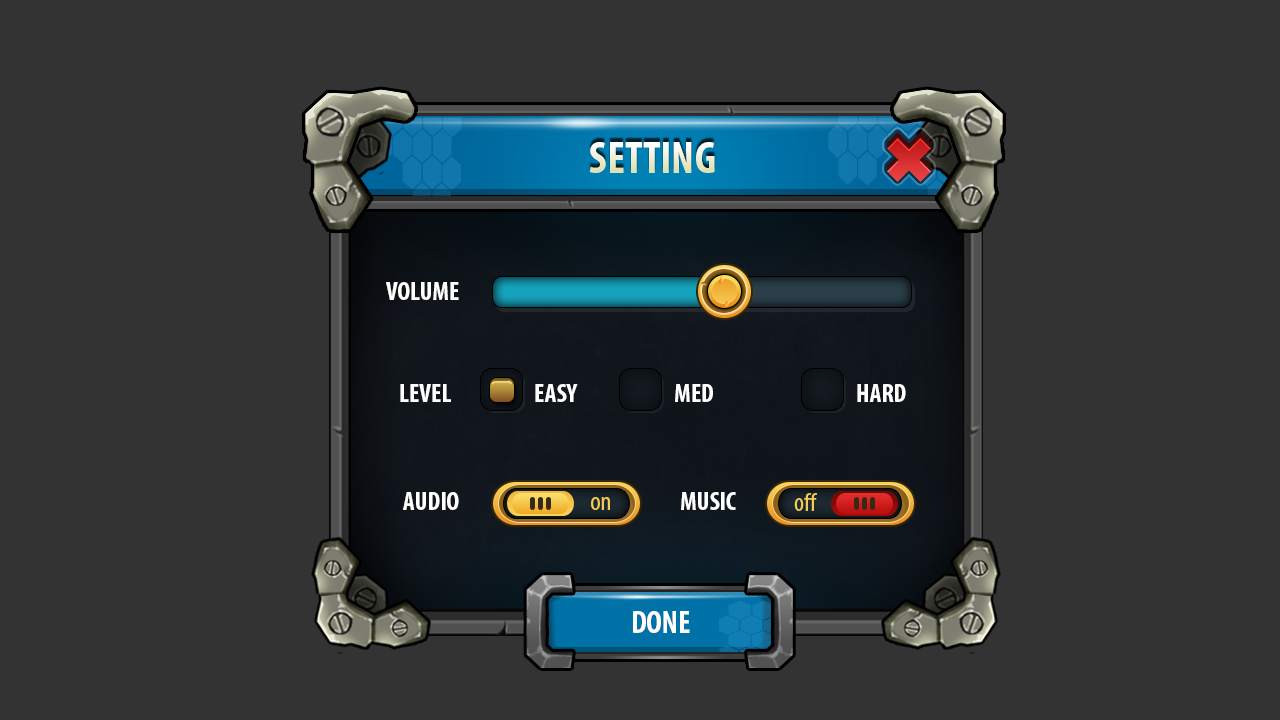
<style>
.page{position:relative;width:1280px;height:720px;background:#333333}
.page>*{position:absolute;margin:0}
.t1{font:45px "MyriadPro-BoldCond";text-transform:uppercase}
.t2{font:26px "MyriadPro-BoldCond";color:#ffffff;text-transform:uppercase}
.t3{font:26px "MyriadPro-Cond";color:#f5cc52}
.t4{font:31.5px "MyriadPro-BoldCond";color:#ffffff;text-transform:uppercase}
</style>
<div class="page">
<p class="t1" style="left:590px;top:142px;width:125px;height:31px">Setting</p>
<p class="t2" style="left:386px;top:282px;width:73px;height:18px">Volume</p>
<p class="t2" style="left:400px;top:384px;width:51px;height:18px">Level</p>
<p class="t2" style="left:535px;top:384px;width:43px;height:18px">easy</p>
<p class="t2" style="left:675px;top:384px;width:38px;height:18px">Med</p>
<p class="t2" style="left:857px;top:384px;width:49px;height:18px">Hard</p>
<p class="t2" style="left:403px;top:492px;width:56px;height:18px">Audio</p>
<p class="t3" style="left:591px;top:497px;width:19px;height:13px">on</p>
<p class="t2" style="left:681px;top:492px;width:55px;height:18px">Music</p>
<p class="t3" style="left:794px;top:493px;width:24px;height:18px">off</p>
<p class="t4" style="left:633px;top:611px;width:57px;height:22px">Done</p>
</div>
